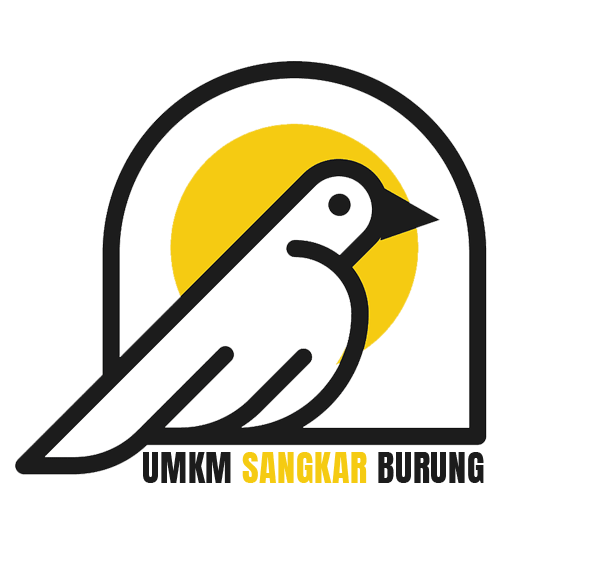
<style>
.page{position:relative;width:589px;height:562px;background:#ffffff}
.page>*{position:absolute;margin:0}
.t1{font:35.6px "Anton-Regular";letter-spacing:0.025em;color:#f5cb12}
.t2{font:35.6px "Anton-Regular";letter-spacing:0.025em;color:#1c1c1c}
</style>
<div class="page">
<p class="t1" style="left:143px;top:452px;width:341px;height:31px"><span class="t2">UMKM </span>SANGKAR<span class="t2"> BURUNG</span></p>
</div>
